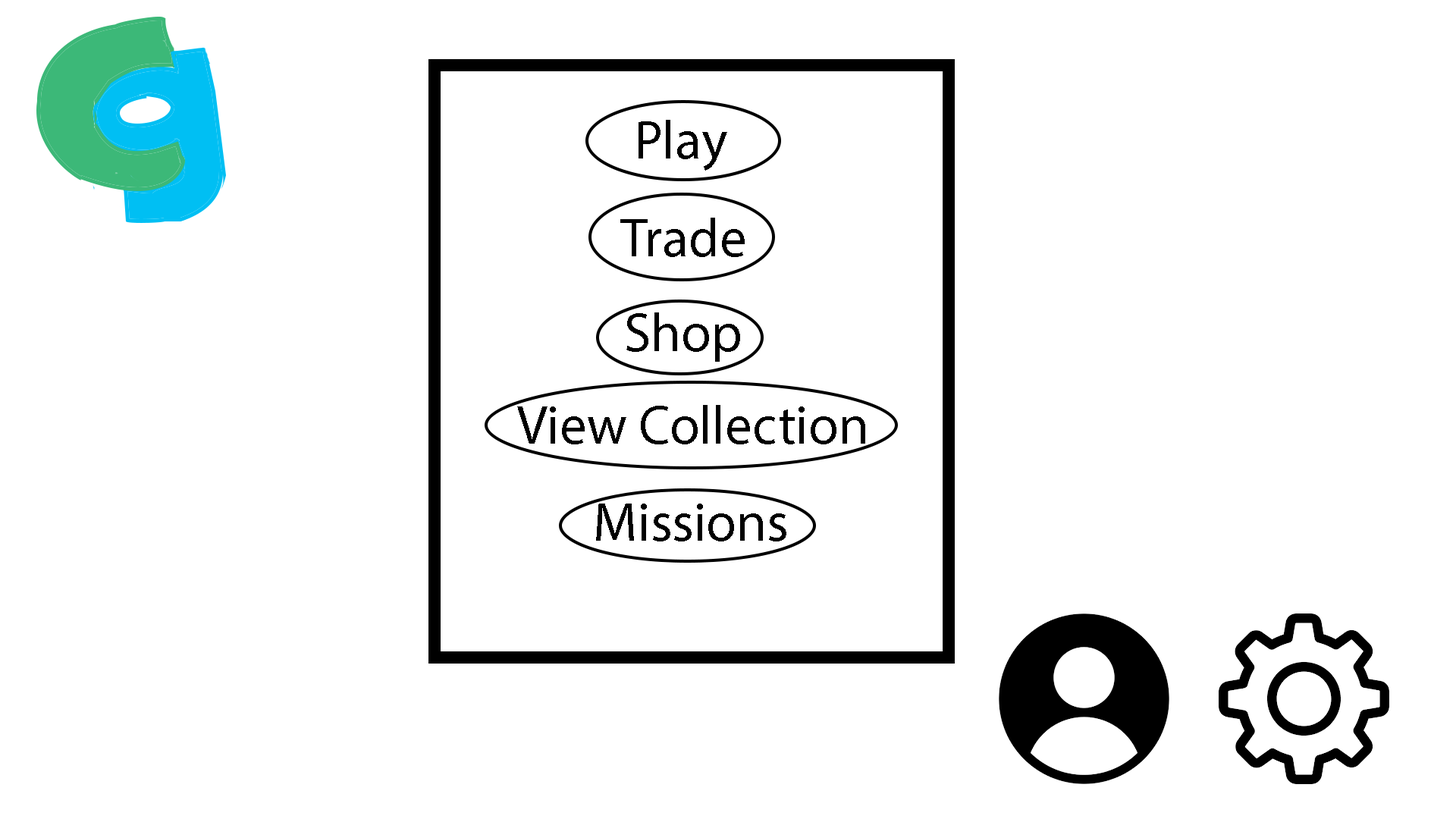
<style>
.page{position:relative;width:1456px;height:819px;background:#ffffff}
.page>*{position:absolute;margin:0}
.t1{font:54.6px "MyriadPro-Regular";color:#000000}
</style>
<div class="page">
<p class="t1" style="left:639px;top:120px;width:88px;height:51px">Play</p>
<p class="t1" style="left:620px;top:218px;width:125px;height:39px">Trade</p>
<p class="t1" style="left:626px;top:312px;width:114px;height:50px">Shop</p>
<p class="t1" style="left:517px;top:405px;width:348px;height:39px">View Collection</p>
<p class="t1" style="left:596px;top:504px;width:190px;height:37px">Missions</p>
</div>
